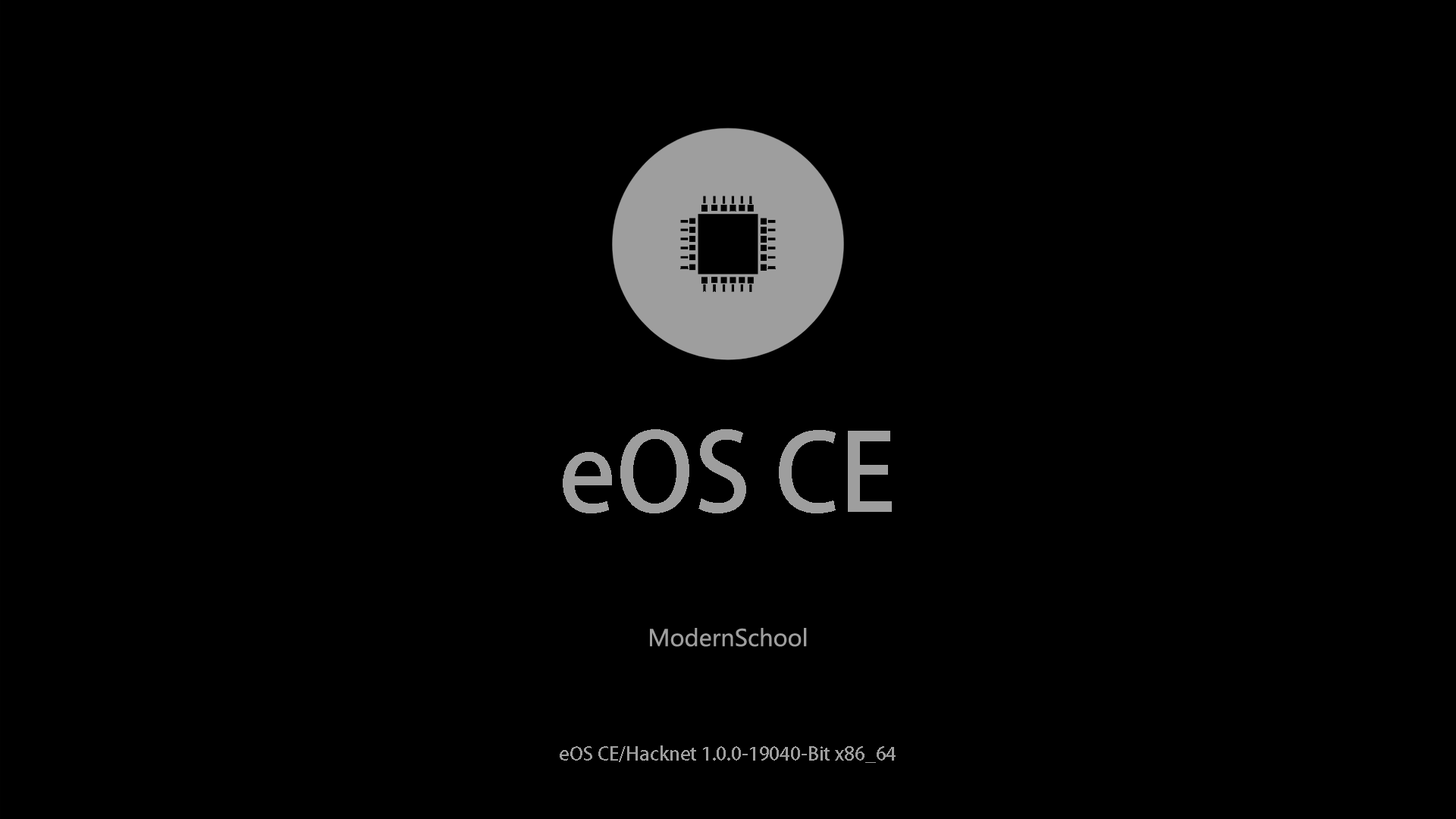
<style>
.page{position:relative;width:1456px;height:819px;background:#000000}
.page>*{position:absolute;margin:0}
.t1{font:106.2px "AdobeHeitiStd-Regular";color:#9e9e9e}
.t2{font:19px "AdobeHeitiStd-Regular";color:#9e9e9e}
</style>
<div class="page">
<p class="t1" style="left:563px;top:429px;width:329px;height:84px">eOS CE</p>
<p class="t2" style="left:560px;top:745px;width:336px;height:18px">eOS CE/Hacknet 1.0.0-19040-Bit x86_64</p>
</div>
